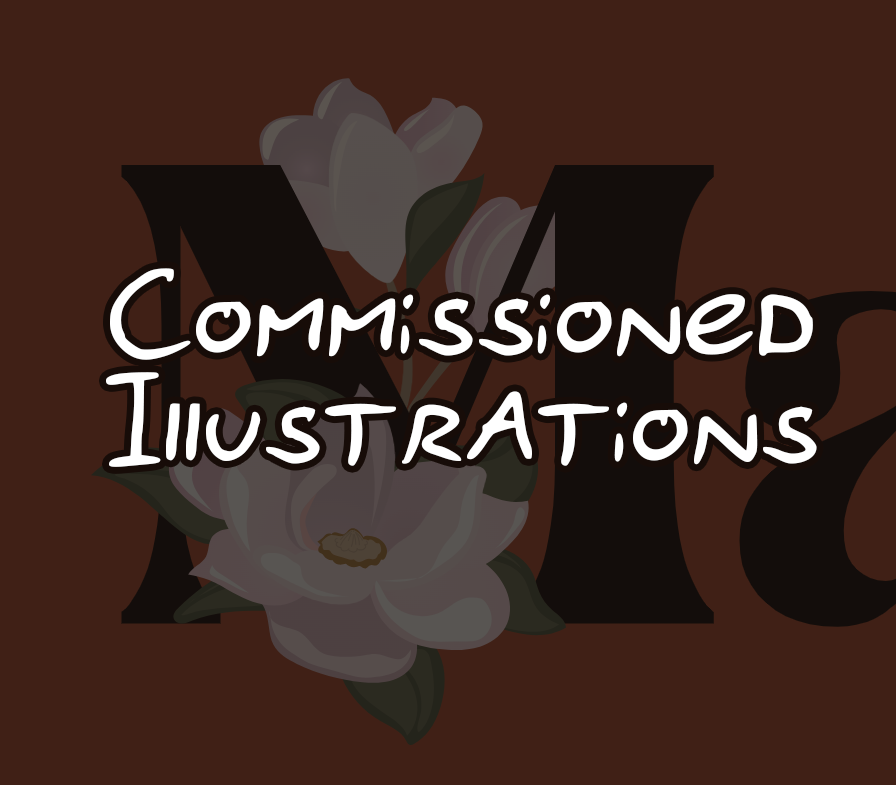
<style>
.page{position:relative;width:896px;height:785px;background:#402016}
.page>*{position:absolute;margin:0}
.t1{font:166.7px/108.3px "Floris-Regular";color:#ffffff}
</style>
<div class="page">
<p class="t1" style="left:106px;top:268px;width:711px;height:199px;text-align:center">Commissioned<br>Illustrations</p>
</div>
